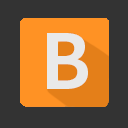
<style>
.page{position:relative;width:128px;height:128px;background:#333333}
.page>*{position:absolute;margin:0}
.t1{font:75px "NotoSansCJKtc-Bold";color:#ffffff}
</style>
<div class="page">
<p class="t1" style="left:47px;top:33px;width:41px;height:56px">B</p>
</div>
